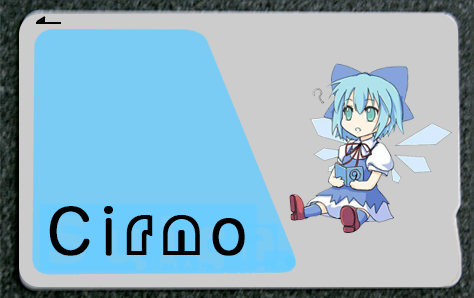
<style>
.page{position:relative;width:474px;height:298px;background:#cccccc}
.page>*{position:absolute;margin:0}
.t1{font:72px "STCaiyun";color:#000000;font-weight:bold}
.t2{font:60px "Jun201Pro-Regular";color:#000000;font-weight:bold}
</style>
<div class="page">
<p class="t1" style="left:49px;top:206px;width:196px;height:50px"><span class="t2">C  i  </span>r   n  <span class="t2">o</span></p>
</div>
